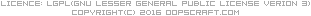
<style>
.page{position:relative;width:311px;height:16px;background:#ffffff}
.page>*{position:absolute;margin:0}
.t1{font:8px "04b08";color:#ababab}
</style>
<div class="page">
<p class="t1" style="left:1px;top:1px;width:310px;height:14px;text-align:center">LICENCE: LGPL(GNU LESSER GENERAL PUBLIC LICENSE VERION 3)<br>COPYRIGHT(C) 2016 OOPSCRAFT.COM</p>
</div>
